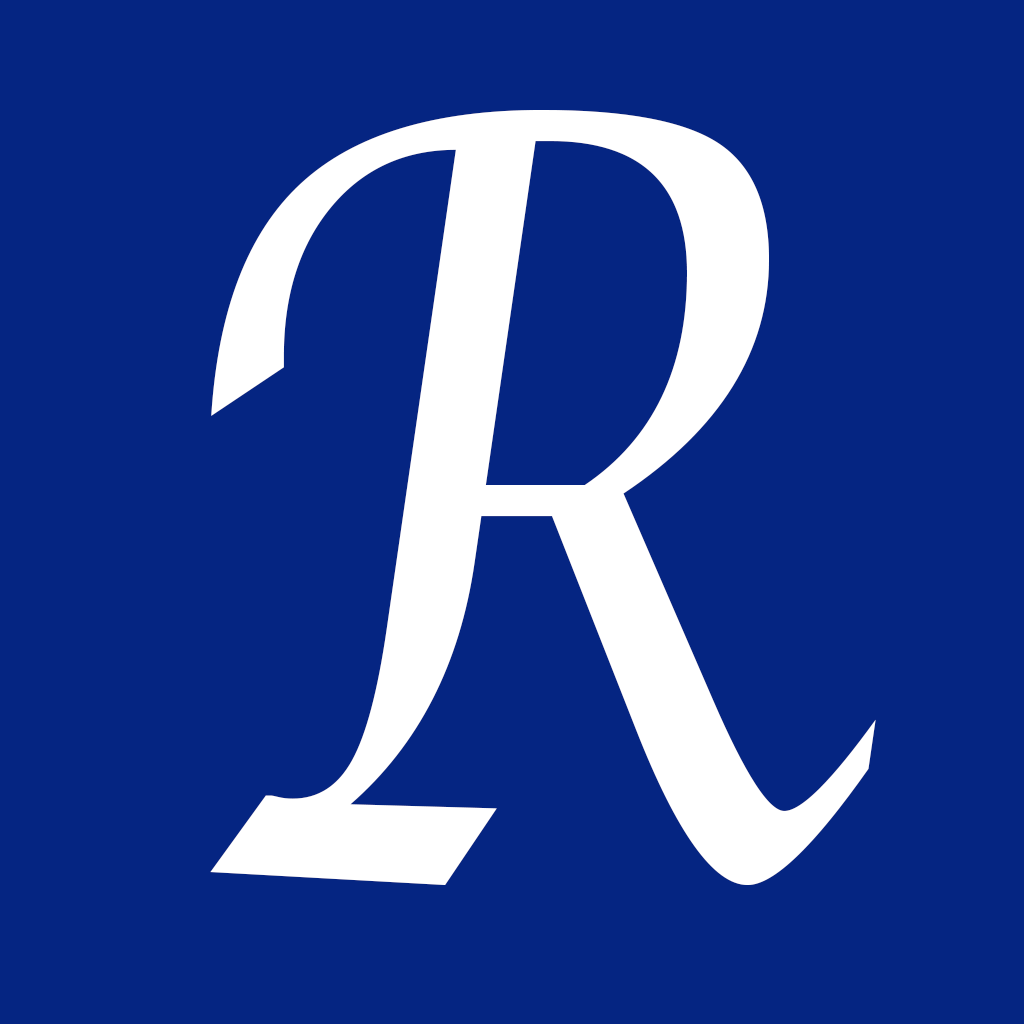
<style>
.page{position:relative;width:1024px;height:1024px;background:#052582}
.page>*{position:absolute;margin:0}
.t1{font:1054px "LucidaCalligraphy-Italic";color:#ffffff;scale:0.73 1}
</style>
<div class="page">
<p class="t1" style="left:210px;top:110px;width:666px;height:775px">R</p>
</div>
